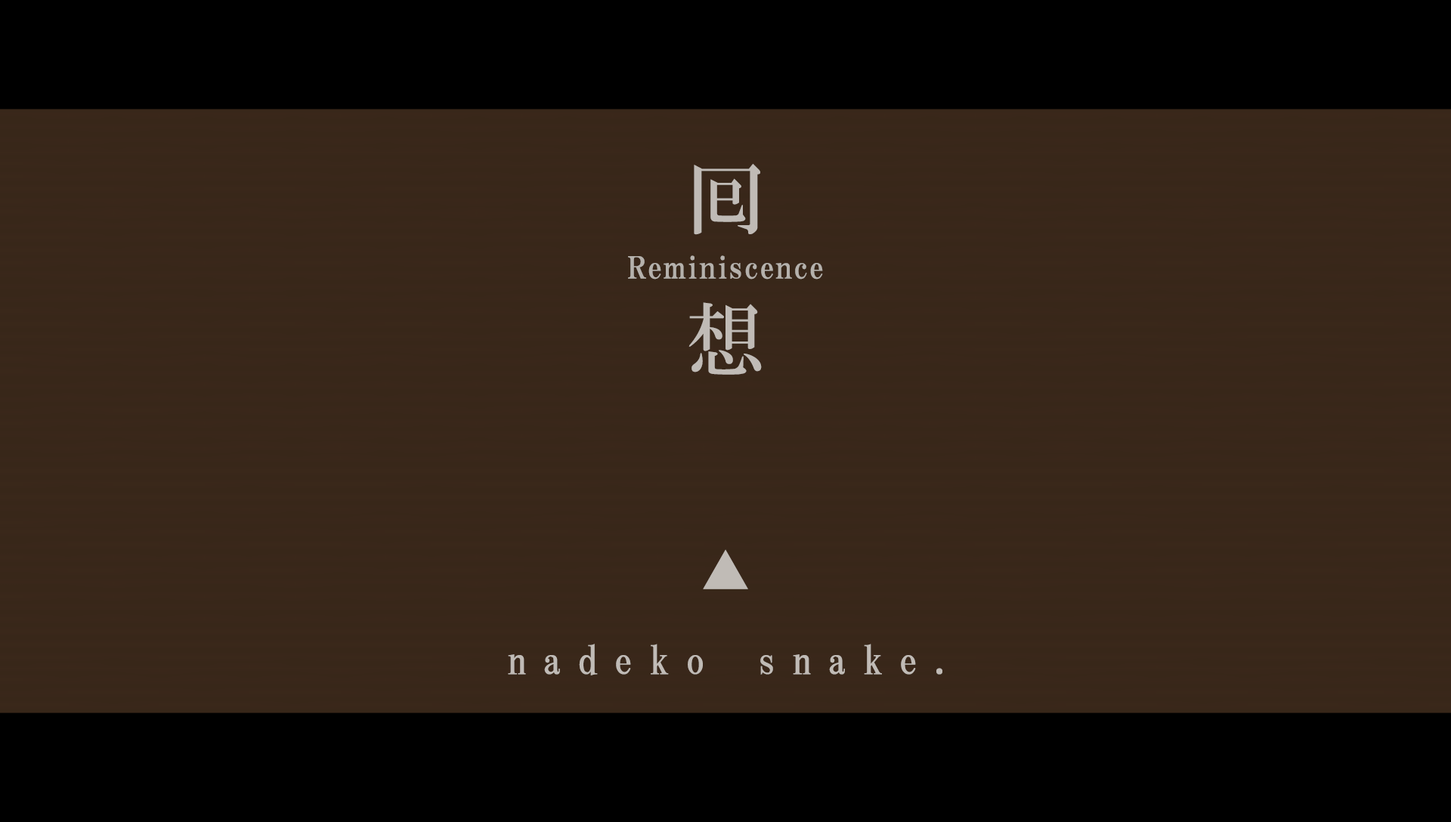
<style>
.page{position:relative;width:1451px;height:822px;background:#39271a}
.page>*{position:absolute;margin:0}
.t1{font:79.6px/75.8px "HGMinchoB";letter-spacing:0.77em;color:#c0bbb6}
.t2{font:30.2px "HGPMinchoE";letter-spacing:0.05em;color:#b5b1ac}
.t3{font:53.9px "HGMinchoB";letter-spacing:0.4em;color:#c0bbb6}
.t4{font:39.6px "HGMinchoB";letter-spacing:0.4em;color:#c0bbb6}
</style>
<div class="page">
<p class="t1" style="left:688px;top:163px;width:74px;height:212px">囘想</p>
<p class="t2" style="left:628px;top:255px;width:195px;height:25px">Reminiscence</p>
<p class="t3" style="left:703px;top:549px;width:45px;height:40px">▲</p>
<p class="t4" style="left:508px;top:644px;width:434px;height:31px">nadeko snake.</p>
</div>
